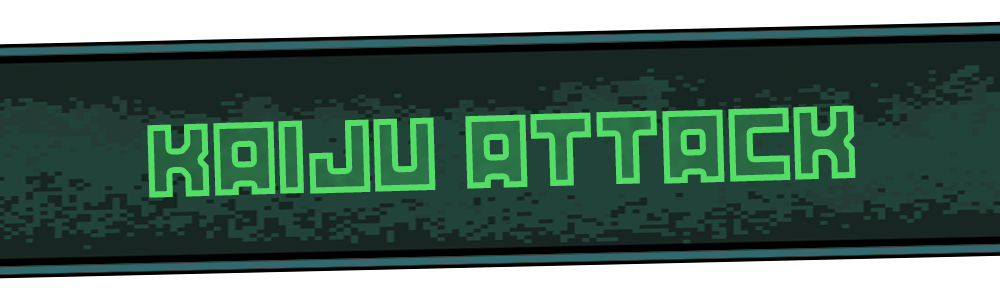
<style>
.page{position:relative;width:1000px;height:300px;background:#ffffff}
.page>*{position:absolute;margin:0}
.t1{font:108.5px "AgitPropMedium";letter-spacing:-0.03em;font-weight:bold;scale:0.9 1}
</style>
<div class="page">
<p class="t1" style="left:147px;top:105px;width:709px;height:93px;rotate:-2deg">KAIJU ATTACK</p>
</div>
